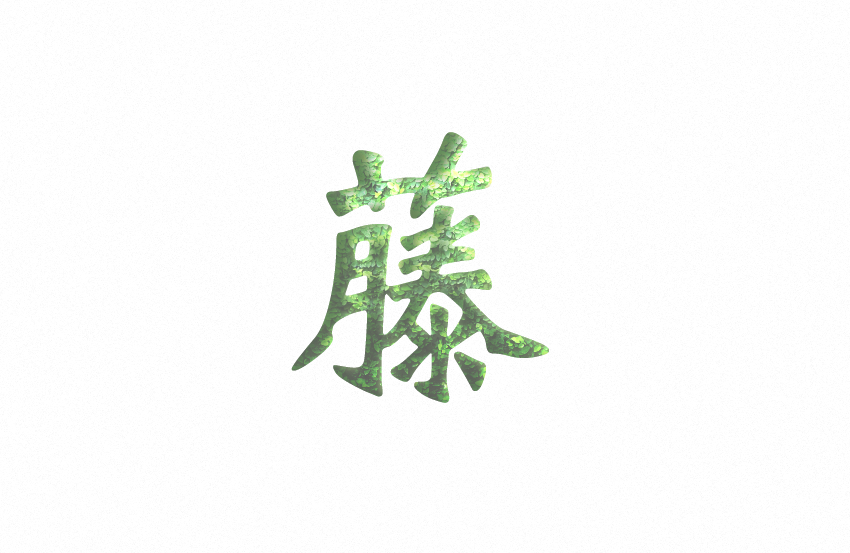
<style>
.page{position:relative;width:850px;height:553px;background:#ffffff}
.page>*{position:absolute;margin:0}
.t1{font:300px "STXinwei"}
</style>
<div class="page">
<p class="t1" style="left:291px;top:132px;width:258px;height:271px">藤</p>
<p class="t1" style="left:291px;top:132px;width:258px;height:271px">藤</p>
<p class="t1" style="left:291px;top:132px;width:258px;height:271px">藤</p>
<p class="t1" style="left:291px;top:132px;width:258px;height:271px">藤</p>
</div>
